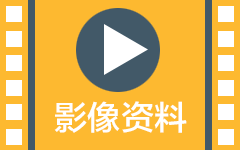
<style>
.page{position:relative;width:240px;height:150px;background:#fdb930}
.page>*{position:absolute;margin:0}
.t1{font:33.3px "FZLTZHK--GBK1-0";color:#ffffff}
</style>
<div class="page">
<p class="t1" style="left:54px;top:101px;width:133px;height:32px">影像资料</p>
</div>
